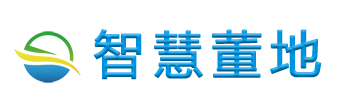
<style>
.page{position:relative;width:337px;height:108px;background:#ffffff}
.page>*{position:absolute;margin:0}
.t1{font:50px "MicrosoftYaHei";letter-spacing:0.15em;font-weight:bold}
</style>
<div class="page">
<p class="t1" style="left:93px;top:29px;width:229px;height:51px">智慧董地</p>
</div>
